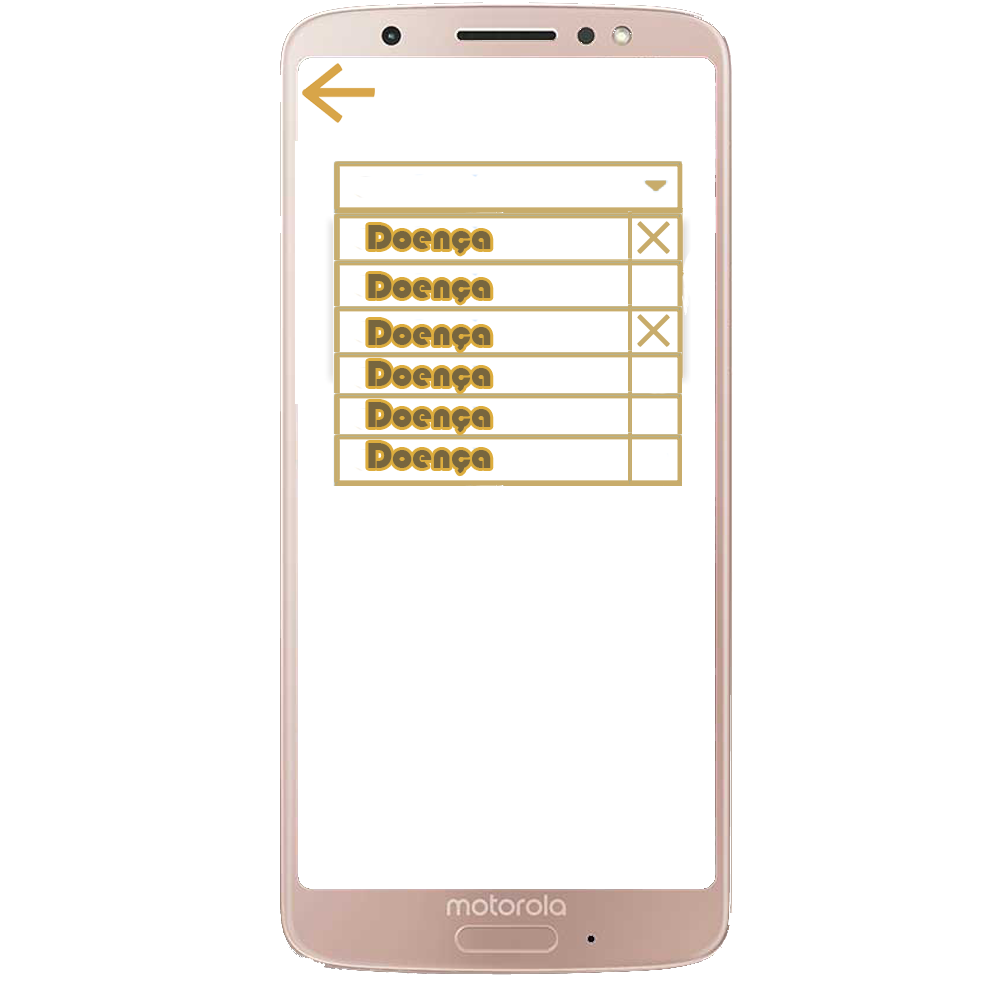
<style>
.page{position:relative;width:1000px;height:1000px;background:#ffffff}
.page>*{position:absolute;margin:0}
.t1{font:36px "Bauhaus93";color:#78663e}
.t2{font:36.7px "Bauhaus93";color:#78663e}
</style>
<div class="page">
<p class="t1" style="left:368px;top:225px;width:123px;height:29px">Doença</p>
<p class="t1" style="left:368px;top:274px;width:123px;height:29px">Doença</p>
<p class="t2" style="left:368px;top:320px;width:123px;height:31px">Doença</p>
<p class="t2" style="left:368px;top:361px;width:123px;height:31px">Doença</p>
<p class="t2" style="left:368px;top:402px;width:123px;height:31px">Doença</p>
<p class="t2" style="left:368px;top:443px;width:123px;height:31px">Doença</p>
</div>
